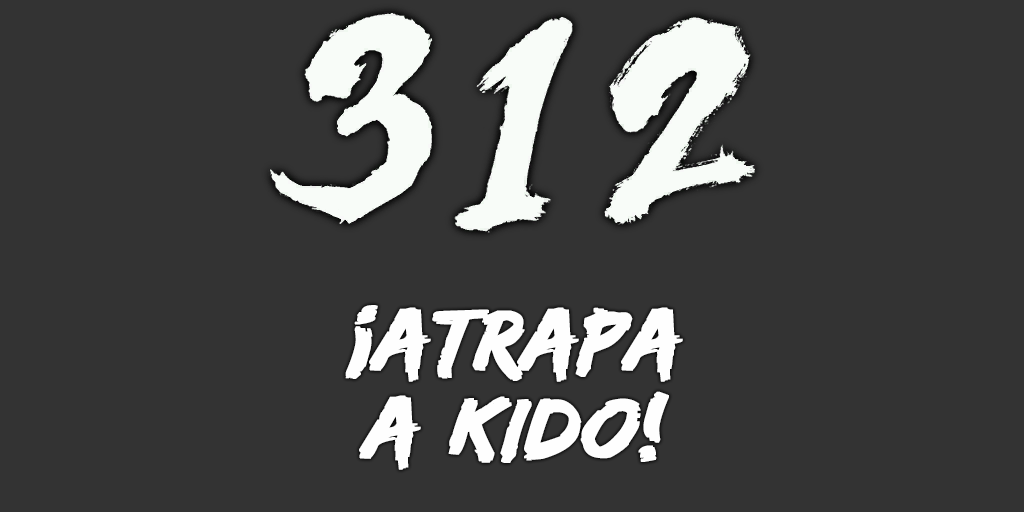
<style>
.page{position:relative;width:1024px;height:512px;background:#333333}
.page>*{position:absolute;margin:0}
.t1{font:88px/88px "EdoSZ";color:#fefefe;font-weight:bold;font-style:italic;scale:1.04 1}
</style>
<div class="page">
<p class="t1" style="left:345px;top:305px;width:338px;height:165px;text-align:center">¡atrapa<br>a kido!</p>
</div>
